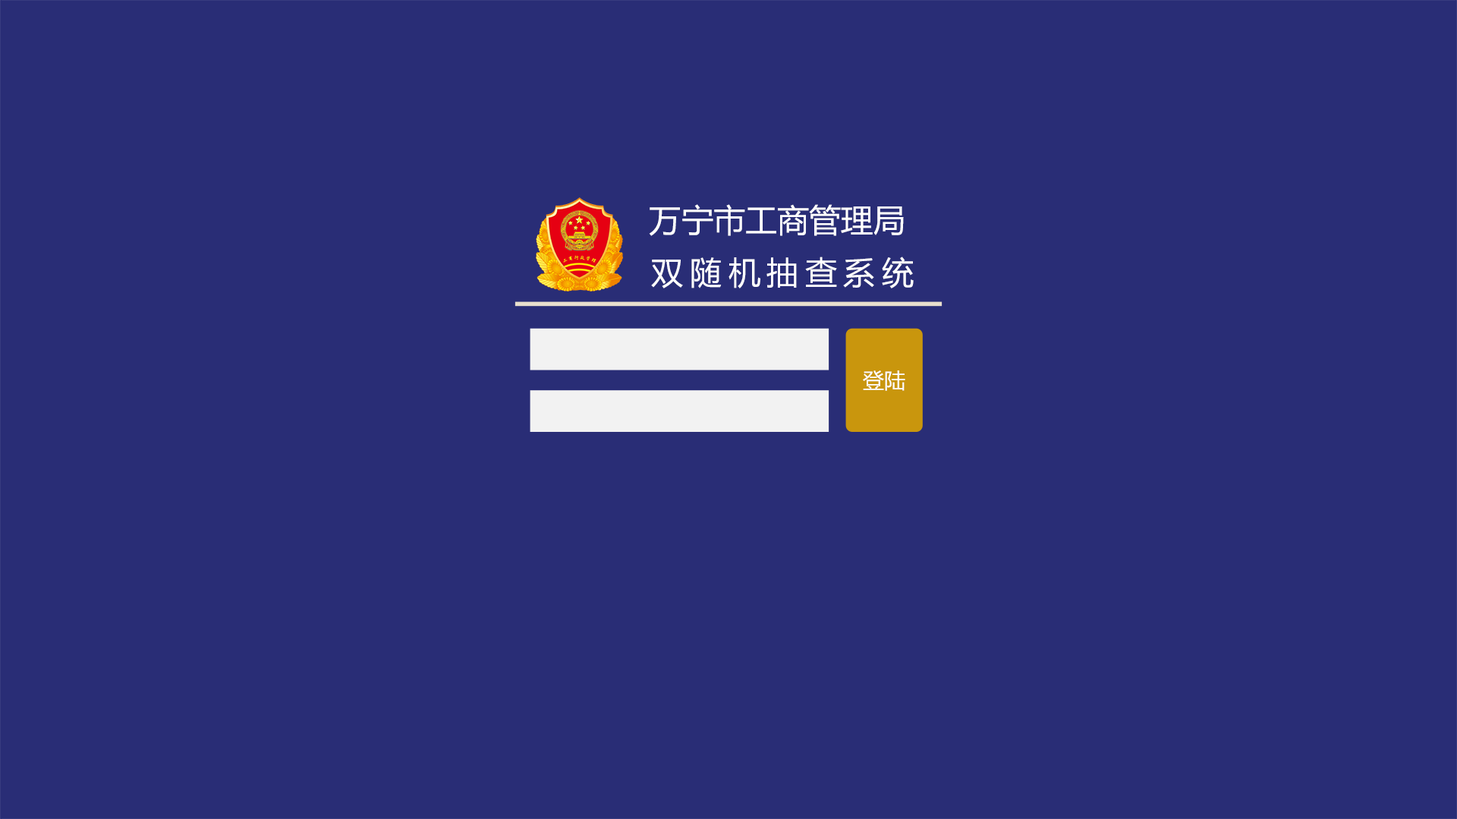
<style>
.page{position:relative;width:1457px;height:819px;background:#292d76}
.page>*{position:absolute;margin:0}
.t1{font:32px "MicrosoftYaHei";color:#ffffff}
.t2{font:32px "MicrosoftYaHei";letter-spacing:0.2em;color:#ffffff}
.t3{font:21.3px "MicrosoftYaHei";color:#ffffff}
</style>
<div class="page">
<p class="t1" style="left:649px;top:204px;width:255px;height:32px">万宁市工商管理局</p>
<p class="t2" style="left:651px;top:256px;width:262px;height:32px">双随机抽查系统</p>
<p class="t3" style="left:863px;top:370px;width:42px;height:21px">登陆</p>
</div>
